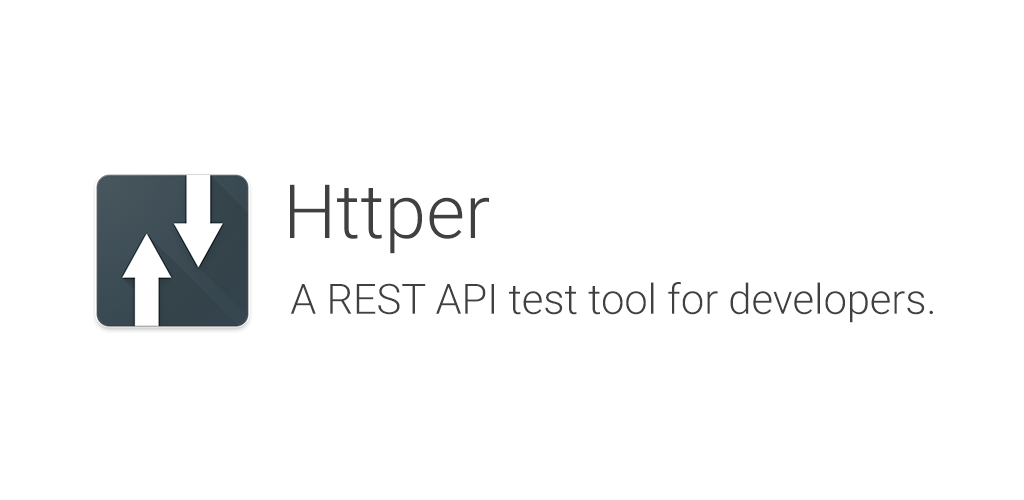
<style>
.page{position:relative;width:1024px;height:500px;background:#ffffff}
.page>*{position:absolute;margin:0}
.t1{font:75px "Roboto-Light";color:#404040}
.t2{font:41.7px "Roboto-Light";color:#404040}
</style>
<div class="page">
<p class="t1" style="left:290px;top:184px;width:200px;height:70px">Httper</p>
<p class="t2" style="left:290px;top:282px;width:643px;height:41px">A REST API test tool for developers.</p>
</div>
